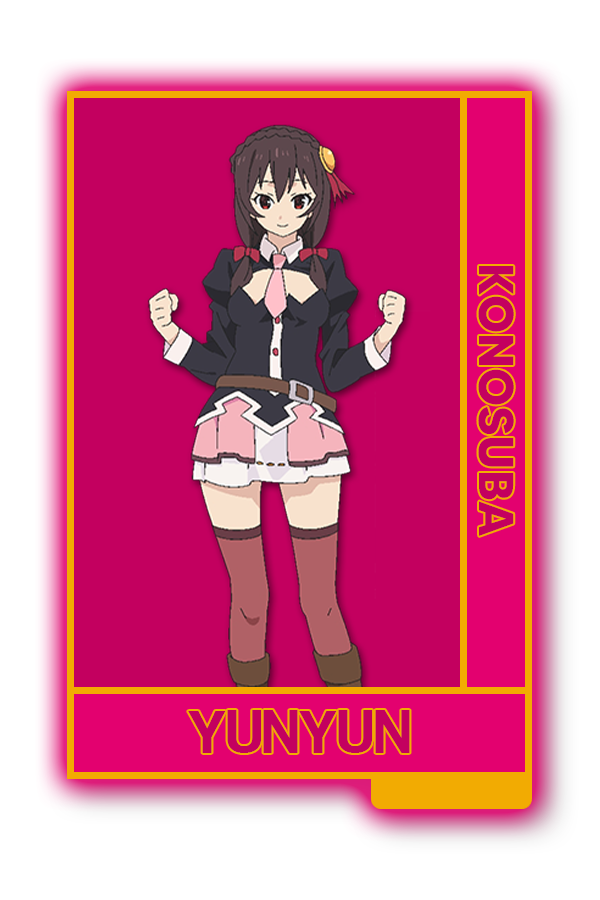
<style>
.page{position:relative;width:600px;height:900px;background:#c3005f}
.page>*{position:absolute;margin:0}
.t1{font:48.8px "MADETOMMY-Bold";color:#c3005f}
.t2{font:62.7px "CoolveticaRg-Regular";color:#c3005f}
</style>
<div class="page">
<p class="t1" style="left:478px;top:266px;width:36px;height:270px;rotate:90deg">KONOSUBA</p>
<p class="t2" style="left:188px;top:710px;width:222px;height:43px">YUNYUN</p>
</div>
